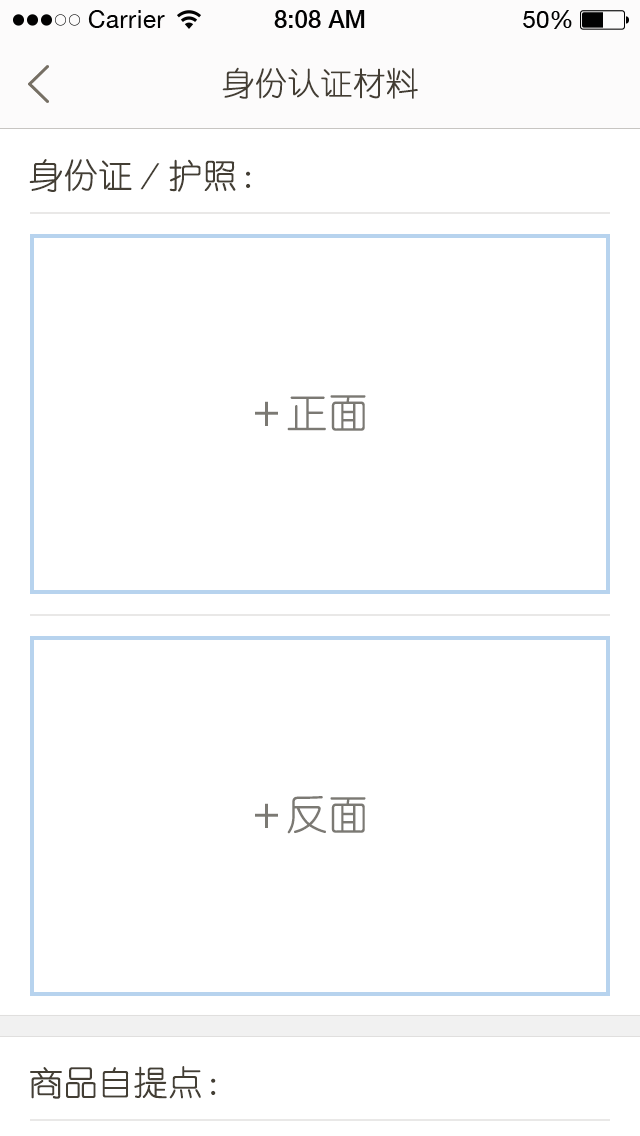
<style>
.page{position:relative;width:640px;height:1136px;background:#ffffff}
.page>*{position:absolute;margin:0}
.t1{font:32px "YouYuan";color:#433d33;text-transform:uppercase;font-weight:bold}
.t2{font:34px "YouYuan";color:#433e34;text-transform:uppercase;font-weight:bold}
.t3{font:40px "YouYuan";color:#7b7973;text-transform:uppercase;font-weight:bold}
</style>
<div class="page">
<p class="t1" style="left:222px;top:67px;width:196px;height:32px">身份认证材料</p>
<p class="t2" style="left:29px;top:159px;width:222px;height:33px">身份证／护照：</p>
<p class="t3" style="left:255px;top:395px;width:111px;height:36px">＋正面</p>
<p class="t3" style="left:255px;top:796px;width:111px;height:38px">＋反面</p>
<p class="t2" style="left:30px;top:1066px;width:186px;height:33px">商品自提点：</p>
</div>
